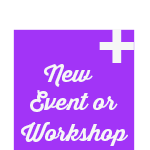
<style>
.page{position:relative;width:150px;height:150px;background:#a234f7}
.page>*{position:absolute;margin:0}
.t1{font:68px "Arial-BoldMT";color:#f6f6f6}
.t2{font:23px "ThirstyScript-Bold";color:#f6f6f6}
</style>
<div class="page">
<p class="t1" style="left:99px;top:29px;width:35px;height:34px">+</p>
<p class="t2" style="left:44px;top:64px;width:49px;height:23px">New</p>
<p class="t2" style="left:30px;top:90px;width:88px;height:22px">Event or</p>
<p class="t2" style="left:21px;top:122px;width:107px;height:24px">Workshop</p>
</div>
